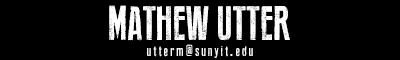
<style>
.page{position:relative;width:400px;height:60px;background:#000000}
.page>*{position:absolute;margin:0}
.t1{font:48px "PressFeelingEroded";color:#ffffff}
.t2{font:14px "PressFeelingEroded";color:#ffffff}
</style>
<div class="page">
<p class="t1" style="left:109px;top:5px;width:181px;height:36px">MATHEW UTTER</p>
<p class="t2" style="left:147px;top:44px;width:106px;height:14px">u t t e r m @ s u n y i t . e d u</p>
</div>
